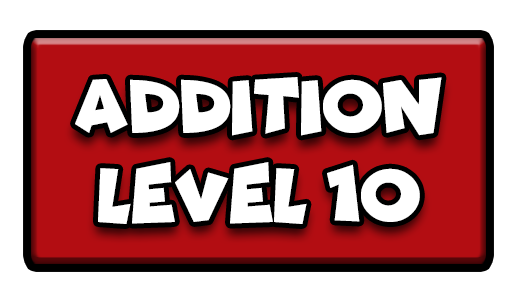
<style>
.page{position:relative;width:517px;height:301px;background:#ffffff}
.page>*{position:absolute;margin:0}
.t1{font:77.7px "Funhouse";color:#ffffff;scale:0.95 1}
</style>
<div class="page">
<p class="t1" style="left:75px;top:77px;width:367px;height:59px">ADDITION</p>
<p class="t1" style="left:98px;top:162px;width:322px;height:62px">LEVEL 10</p>
</div>
